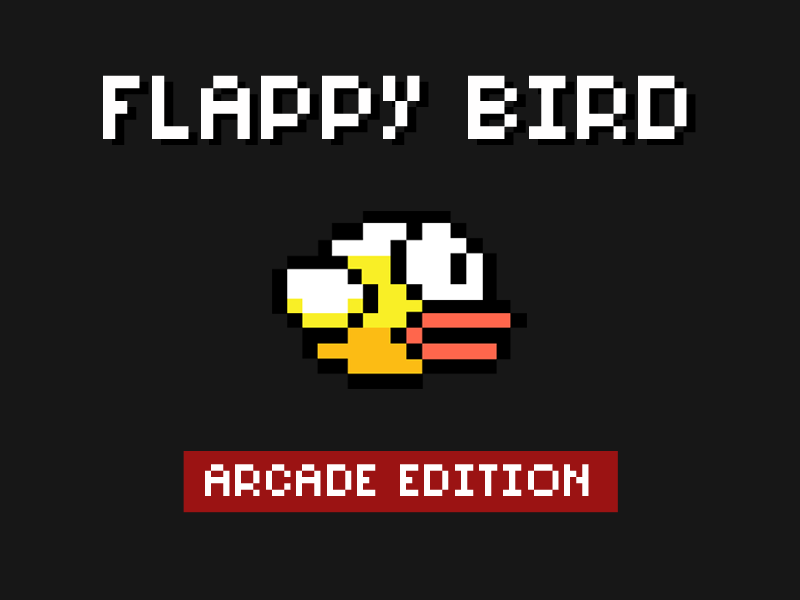
<style>
.page{position:relative;width:800px;height:600px;background:#171717}
.page>*{position:absolute;margin:0}
.t1{font:97.4px "PixelSix02";color:#fffefe;text-transform:uppercase}
.t2{font:48.8px "PixelSix02";color:#fffefe;text-transform:uppercase}
</style>
<div class="page">
<p class="t1" style="left:103px;top:75px;width:584px;height:64px">Flappy Bird</p>
<p class="t2" style="left:205px;top:464px;width:384px;height:32px">arcade edition</p>
</div>
